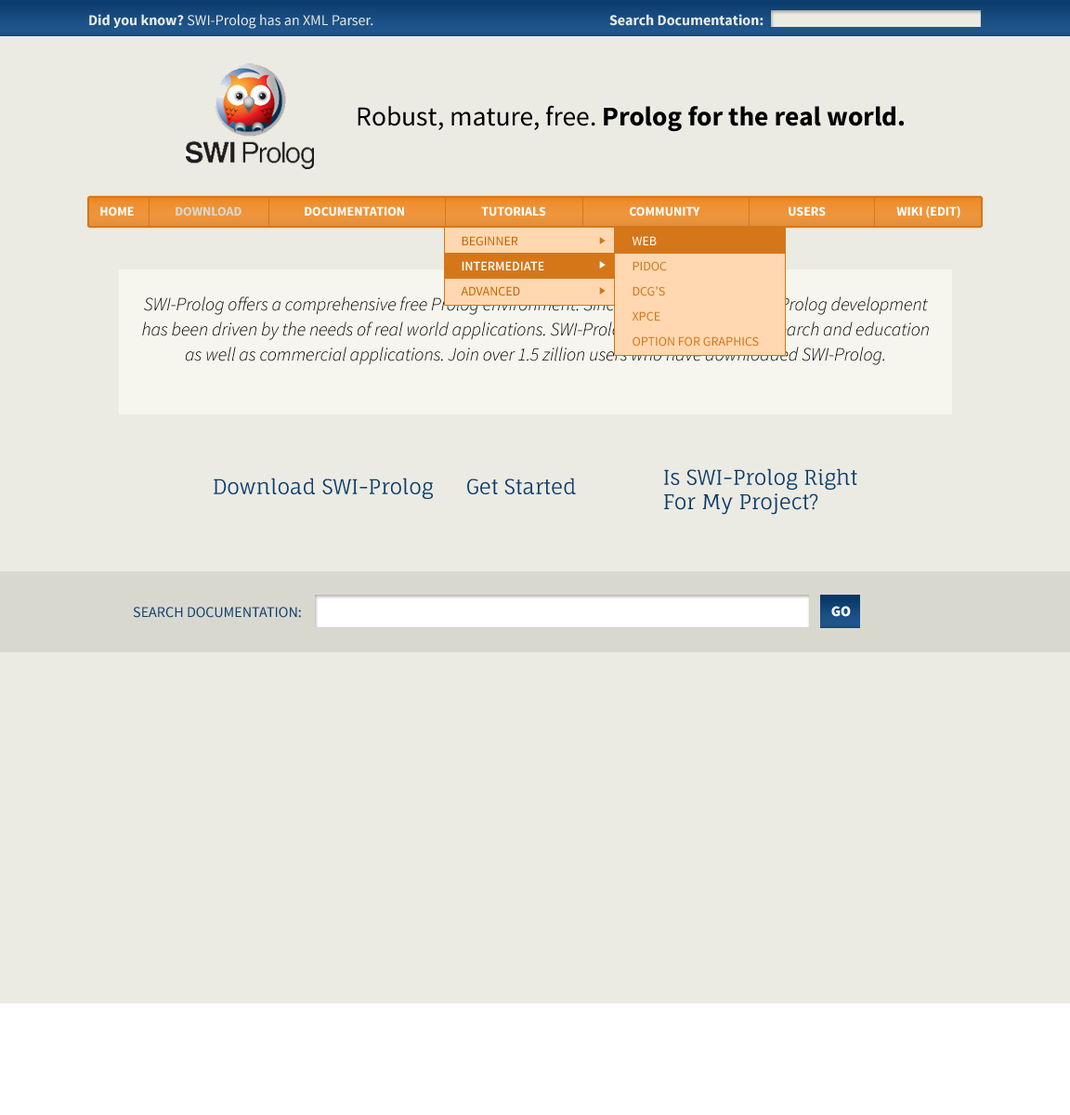
<style>
.page{position:relative;width:1070px;height:1115px;background:#ecebe3}
.page>*{position:absolute;margin:0}
.t1{font:14.9px "SourceSansPro-Regular";color:#ecebe3}
.t2{font:14.9px "SourceSansPro-Bold";color:#ecebe3}
.t3{font:27.3px "SourceSansPro-Bold";color:#000000}
.t4{font:27.3px "SourceSansPro-Regular";color:#000000}
.t5{font:13px "SourceSansPro-Bold";color:#ffffff;text-transform:uppercase}
.t6{font:13px "SourceSansPro-Bold";color:#d9d8cf;text-transform:uppercase}
.t7{font:18.6px/25.1px "SourceSansPro-LightIt";color:#000000}
.t8{font:20.4px "FaunaOne";color:#0a3c6c}
.t9{font:20.4px "FaunaOne";color:#0a3d6c}
.t10{font:14.9px "SourceSansPro-Black";color:#ffffff;text-transform:uppercase}
.t11{font:14.9px "SourceSansPro-Regular";color:#0c3d6d;text-transform:uppercase}
</style>
<div class="page">
<p class="t1" style="left:89px;top:14px;width:284px;height:15px"><span class="t2">Did you know? </span>SWI-Prolog has an XML Parser.</p>
<p class="t2" style="left:609px;top:14px;width:154px;height:12px">Search Documentation:</p>
<p class="t3" style="left:358px;top:105px;width:546px;height:27px"><span class="t4">Robust, mature, free. </span>Prolog for the real world.</p>
<p class="t5" style="left:100px;top:206px;width:34px;height:10px">HOME</p>
<p class="t6" style="left:176px;top:206px;width:65px;height:10px">Download</p>
<p class="t5" style="left:305px;top:206px;width:99px;height:10px">DOCUMENTATION</p>
<p class="t5" style="left:481px;top:206px;width:65px;height:10px">TUTORIALS</p>
<p class="t5" style="left:630px;top:206px;width:70px;height:10px">COMMUNITY</p>
<p class="t5" style="left:789px;top:206px;width:37px;height:10px">Users</p>
<p class="t5" style="left:896px;top:205px;width:64px;height:13px">Wiki (edit)</p>
<p class="t7" style="left:142px;top:296px;width:787px;height:69px;text-align:center">SWI-Prolog offers a comprehensive free Prolog environment. Since its' start in 1987, SWI-Prolog development has been driven by the needs of real world applications. SWI-Prolog is widely used in research and education as well as commercial applications. Join over 1.5 zillion users who have downloaded SWI-Prolog.</p>
<p class="t8" style="left:664px;top:468px;width:193px;height:47px;text-align:justify">Is SWI-Prolog Right<br>For My Project?</p>
<p class="t9" style="left:214px;top:477px;width:219px;height:22px">Download SWI-Prolog</p>
<p class="t8" style="left:467px;top:477px;width:109px;height:17px">Get Started</p>
<p class="t10" style="left:831px;top:606px;width:20px;height:11px">GO</p>
<p class="t11" style="left:133px;top:606px;width:168px;height:12px">Search Documentation:</p>
</div>
